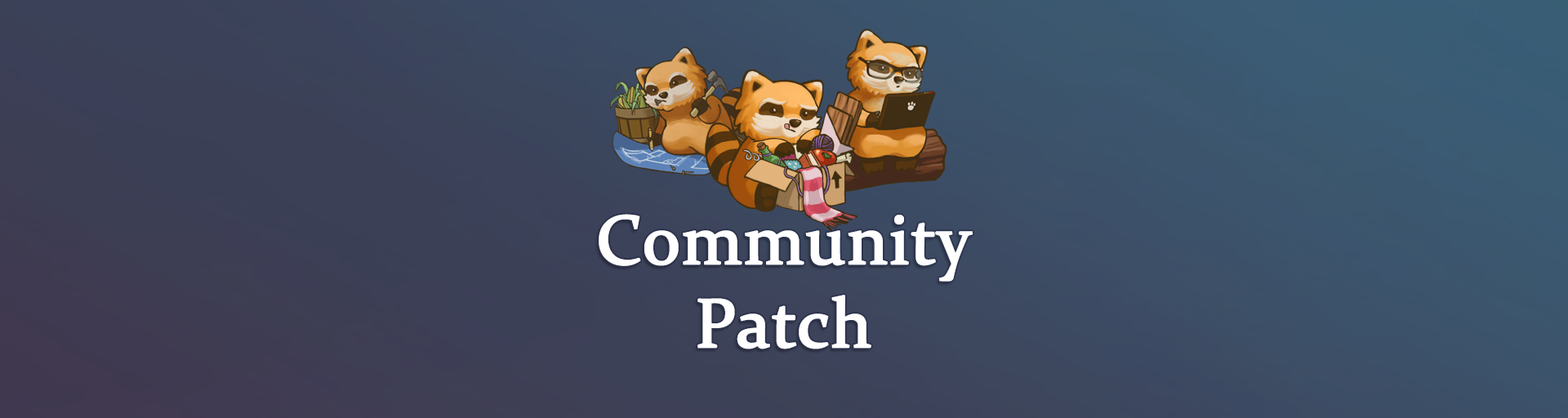
<style>
.page{position:relative;width:1568px;height:418px}
.page>*{position:absolute;margin:0}
.t1{font:69.4px "Constantia";color:#ffffff;font-weight:bold}
</style>
<div class="page">
<p class="t1" style="left:599px;top:214px;width:374px;height:136px;text-align:center">Community Patch</p>
</div>
